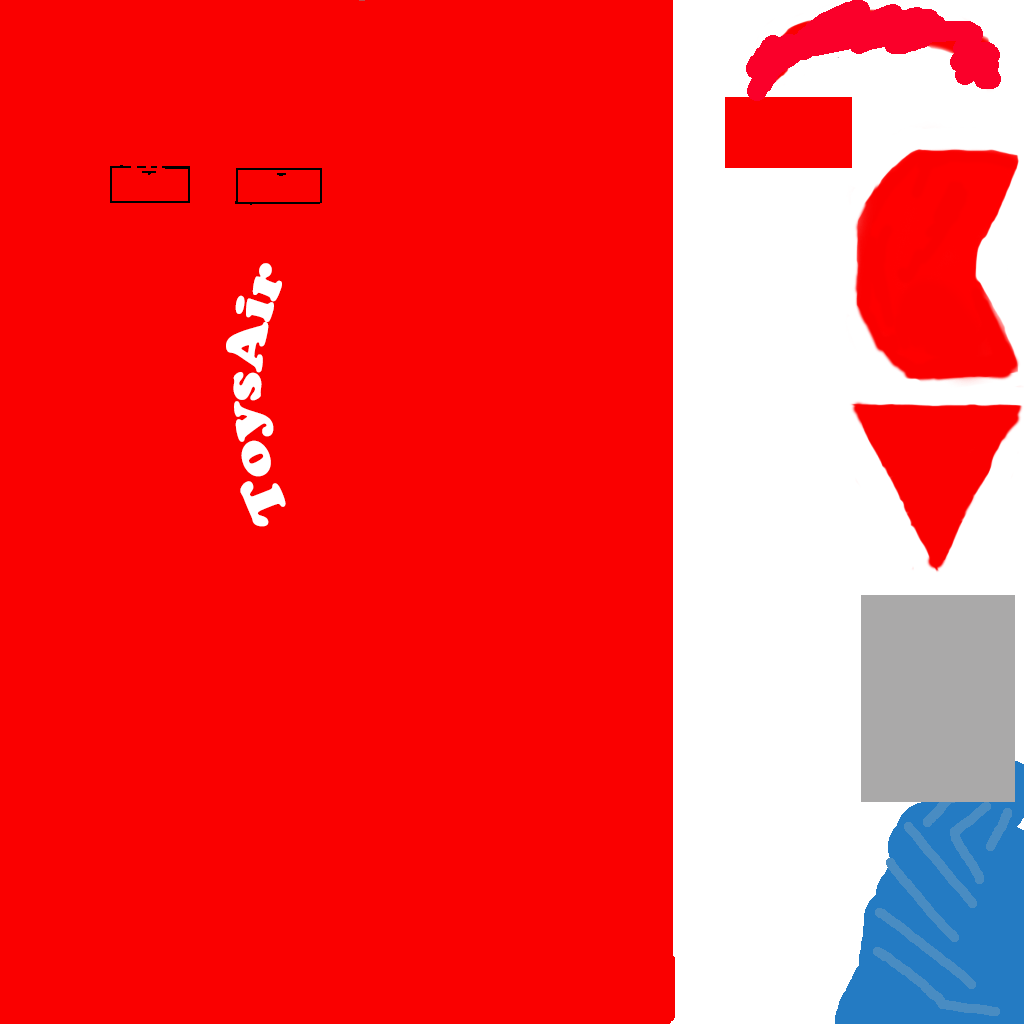
<style>
.page{position:relative;width:1024px;height:1024px;background:#fa0000}
.page>*{position:absolute;margin:0}
.t1{font:55.1px "CooperBlack";color:#ffffff}
</style>
<div class="page">
<p class="t1" style="left:226px;top:263px;width:60px;height:264px;rotate:-91deg">ToysAir</p>
</div>
